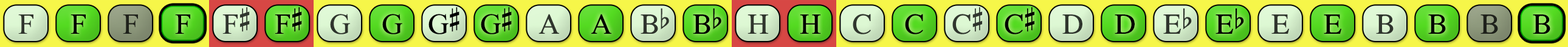
<style>
.page{position:relative;width:1568px;height:47px}
.page>*{position:absolute;margin:0}
.t1{font:29.2px "OpusChords";color:#30362e}
.t2{font:29.2px "OpusChords";color:#000000}
.t3{font:29.2px "OpusChords";color:#1f211b}
.t4{font:29.2px "OpusChords";color:#30352d}
.t5{font:29.2px "OpusChords";color:#2f352d}
.t6{font:29.2px "OpusChords";letter-spacing:-0.025em;color:#000000}
</style>
<div class="page">
<p class="t1" style="left:18px;top:15px;width:15px;height:19px">F</p>
<p class="t2" style="left:70px;top:15px;width:16px;height:19px">F</p>
<p class="t3" style="left:123px;top:15px;width:15px;height:19px">F</p>
<p class="t2" style="left:175px;top:15px;width:15px;height:19px">F</p>
<p class="t4" style="left:222px;top:7px;width:28px;height:27px">F#</p>
<p class="t2" style="left:275px;top:7px;width:27px;height:27px">F#</p>
<p class="t5" style="left:330px;top:14px;width:20px;height:21px">G</p>
<p class="t2" style="left:382px;top:14px;width:20px;height:21px">G</p>
<p class="t6" style="left:428px;top:7px;width:31px;height:28px">G#</p>
<p class="t6" style="left:481px;top:7px;width:31px;height:28px">G#</p>
<p class="t5" style="left:538px;top:14px;width:21px;height:20px">A</p>
<p class="t2" style="left:591px;top:14px;width:20px;height:20px">A</p>
<p class="t4" style="left:641px;top:9px;width:28px;height:25px">Bb</p>
<p class="t2" style="left:693px;top:9px;width:28px;height:25px">Bb</p>
<p class="t4" style="left:748px;top:15px;width:20px;height:19px">H</p>
<p class="t2" style="left:800px;top:15px;width:20px;height:19px">H</p>
<p class="t1" style="left:853px;top:14px;width:18px;height:21px">C</p>
<p class="t2" style="left:905px;top:14px;width:18px;height:21px">C</p>
<p class="t5" style="left:952px;top:7px;width:30px;height:28px">C#</p>
<p class="t2" style="left:1005px;top:7px;width:29px;height:28px">C#</p>
<p class="t5" style="left:1062px;top:15px;width:20px;height:19px">D</p>
<p class="t2" style="left:1115px;top:15px;width:20px;height:19px">D</p>
<p class="t4" style="left:1163px;top:9px;width:29px;height:25px">Eb</p>
<p class="t2" style="left:1216px;top:9px;width:28px;height:25px">Eb</p>
<p class="t1" style="left:1271px;top:15px;width:18px;height:19px">E</p>
<p class="t2" style="left:1324px;top:15px;width:17px;height:19px">E</p>
<p class="t4" style="left:1376px;top:15px;width:18px;height:19px">B</p>
<p class="t2" style="left:1428px;top:15px;width:18px;height:19px">B</p>
<p class="t3" style="left:1480px;top:15px;width:18px;height:19px">B</p>
<p class="t2" style="left:1533px;top:15px;width:17px;height:19px">B</p>
</div>
